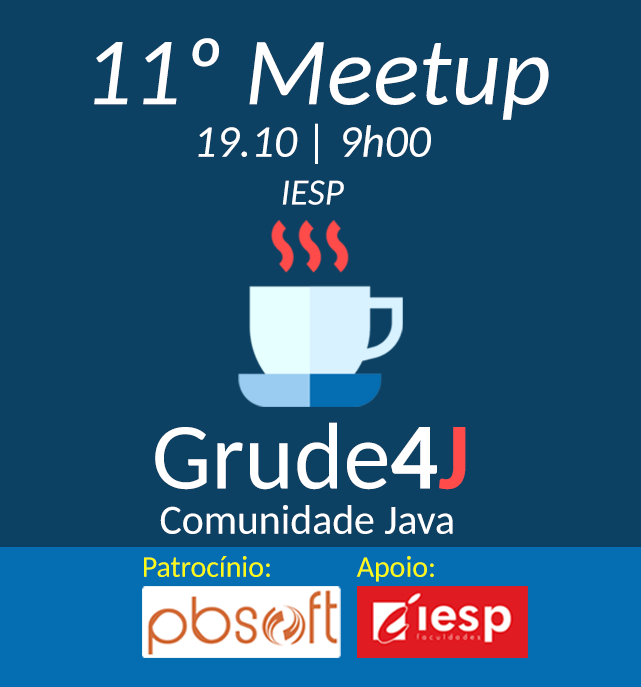
<style>
.page{position:relative;width:641px;height:687px;background:#0d4163}
.page>*{position:absolute;margin:0}
.t1{font:96.8px "Carlito-Italic";color:#ffffff}
.t2{font:45.4px "Carlito-Italic";color:#ffffff}
.t3{font:37.1px "Carlito-Italic";color:#ffffff}
.t4{font:94.7px "Carlito";color:#ffffff}
.t5{font:94.7px "Carlito-Bold";color:#ffffff}
.t6{font:94.7px "Carlito-Bold";color:#ff4b4a}
.t7{font:41.7px "Carlito";color:#ffffff}
.t8{font:29.9px "Carlito";color:#fcfb14}
</style>
<div class="page">
<p class="t1" style="left:94px;top:38px;width:455px;height:82px">11º Meetup</p>
<p class="t2" style="left:198px;top:123px;width:233px;height:41px">19.10 | 9h00</p>
<p class="t3" style="left:282px;top:180px;width:62px;height:25px">IESP</p>
<p class="t4" style="left:155px;top:422px;width:311px;height:68px">Grude<span class="t5">4</span><span class="t6">J</span></p>
<p class="t7" style="left:160px;top:505px;width:293px;height:29px">Comunidade Java</p>
<p class="t8" style="left:144px;top:556px;width:126px;height:21px">Patrocínio:</p>
<p class="t8" style="left:356px;top:556px;width:78px;height:26px">Apoio:</p>
</div>
